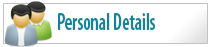
<style>
.page{position:relative;width:211px;height:47px;background:#ffffff}
.page>*{position:absolute;margin:0}
.t1{font:24px "MyriadPro-SemiboldCond";color:#11839a;scale:0.78 1}
</style>
<div class="page">
<p class="t1" style="left:58px;top:13px;width:98px;height:17px">Personal Details</p>
</div>
